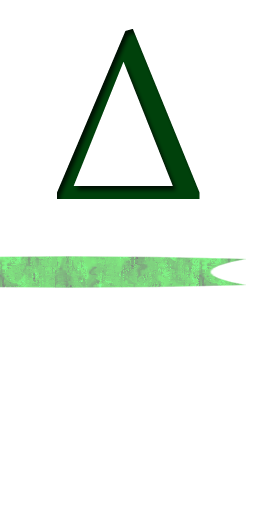
<style>
.page{position:relative;width:256px;height:512px;background:#ffffff}
.page>*{position:absolute;margin:0}
.t1{font:256px "MinionPro-Regular";color:#00410b}
</style>
<div class="page">
<p class="t1" style="left:57px;top:29px;width:143px;height:170px">Δ</p>
</div>
